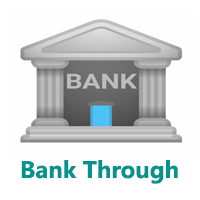
<style>
.page{position:relative;width:200px;height:200px;background:#ffffff}
.page>*{position:absolute;margin:0}
.t1{font:24px "NirmalaUI-Bold";color:#06928d}
</style>
<div class="page">
<p class="t1" style="left:21px;top:160px;width:157px;height:24px">Bank Through</p>
</div>
